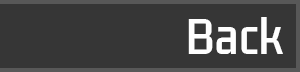
<style>
.page{position:relative;width:300px;height:72px;background:#363636}
.page>*{position:absolute;margin:0}
.t1{font:44px "KdamThmorPro-Regular";color:#fefefe}
</style>
<div class="page">
<p class="t1" style="left:188px;top:17px;width:95px;height:37px">Back</p>
</div>
